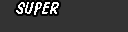
<style>
.page{position:relative;width:128px;height:32px;background:#333333}
.page>*{position:absolute;margin:0}
.t1{font:18px "DomDiagonalBT-Regular";letter-spacing:0.01em;color:#fbfbfb}
</style>
<div class="page">
<p class="t1" style="left:16px;top:2px;width:43px;height:13px">SUPER</p>
</div>
